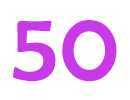
<style>
.page{position:relative;width:130px;height:100px;background:#ffffff}
.page>*{position:absolute;margin:0}
.t1{font:100px "BerlinSansFB-Reg";color:#c83ae7}
</style>
<div class="page">
<p class="t1" style="left:13px;top:20px;width:104px;height:62px">50</p>
</div>
